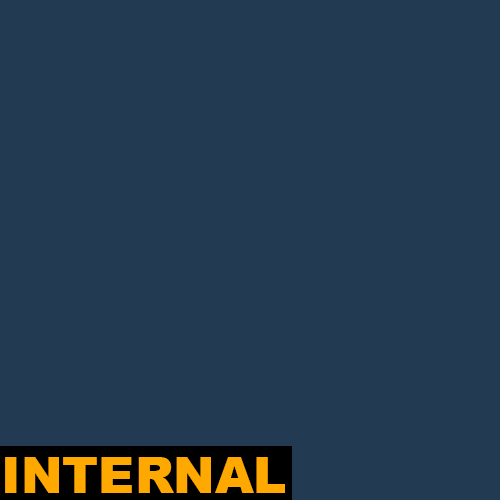
<style>
.page{position:relative;width:500px;height:500px;background:#223b53}
.page>*{position:absolute;margin:0}
.t1{font:50px "Arial-Black";color:#ffa800}
</style>
<div class="page">
<p class="t1" style="left:5px;top:457px;width:280px;height:36px">INTERNAL</p>
</div>
